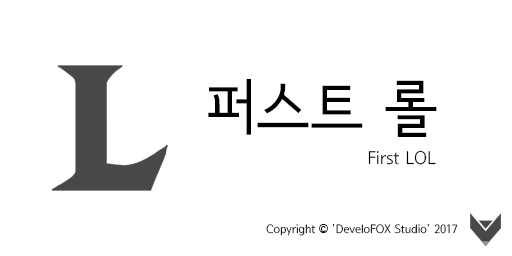
<style>
.page{position:relative;width:512px;height:256px;background:#ffffff}
.page>*{position:absolute;margin:0}
.t1{font:61.8px "SeoulNamsanM";color:#000000}
.t2{font:18px "SeoulNamsanL";color:#000000}
.t3{font:11.9px "SeoulNamsanL";color:#000000}
.t4{font:11.9px "Gulim";color:#000000}
</style>
<div class="page">
<p class="t1" style="left:208px;top:79px;width:229px;height:58px">퍼스트 롤</p>
<p class="t2" style="left:368px;top:150px;width:68px;height:15px">First LOL</p>
<p class="t3" style="left:266px;top:223px;width:192px;height:13px">Copyright <span class="t4">©</span> 'DeveloFOX Studio' 2017</p>
</div>
